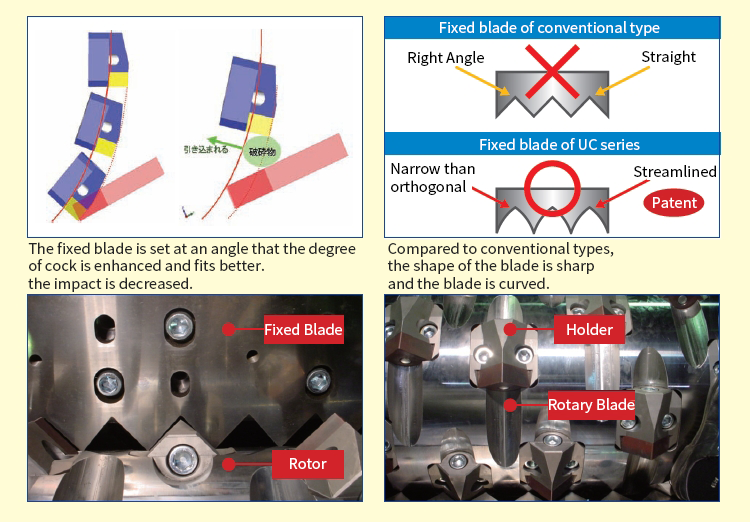
<style>
.page{position:relative;width:750px;height:522px;background:#fffcd6}
.page>*{position:absolute;margin:0}
.t1{font:14.6px "NotoSansCJKkr-Regular";color:#ffffff}
.t2{font:14.6px "NotoSansCJKkr-Regular";color:#000000}
.t3{font:14.6px "NotoSansCJKkr-Regular";color:#242424}
</style>
<div class="page">
<p class="t1" style="left:440px;top:21px;width:220px;height:15px">Fixed blade of conventional type</p>
<p class="t2" style="left:408px;top:51px;width:76px;height:15px">Right Angle</p>
<p class="t2" style="left:642px;top:50px;width:54px;height:15px">Straight</p>
<p class="t1" style="left:480px;top:138px;width:160px;height:12px">Fixed blade of UC series</p>
<p class="t2" style="left:391px;top:162px;width:84px;height:33px">Narrow than <br>orthogonal</p>
<p class="t2" style="left:634px;top:165px;width:82px;height:12px">Streamlined</p>
<p class="t1" style="left:653px;top:197px;width:44px;height:11px">Patent</p>
<p class="t3" style="left:28px;top:242px;width:328px;height:50px">The fixed blade is set at an angle that the degree <br>of cock is enhanced and fits better. <br>the impact is decreased.</p>
<p class="t3" style="left:387px;top:242px;width:227px;height:47px">Compared to conventional types, <br>the shape of the blade is sharp <br>and the blade is curved.</p>
<p class="t1" style="left:265px;top:323px;width:77px;height:12px">Fixed Blade</p>
<p class="t1" style="left:567px;top:323px;width:46px;height:12px">Holder</p>
<p class="t1" style="left:549px;top:398px;width:86px;height:15px">Rotary Blade</p>
<p class="t1" style="left:290px;top:458px;width:37px;height:11px">Rotor</p>
</div>
